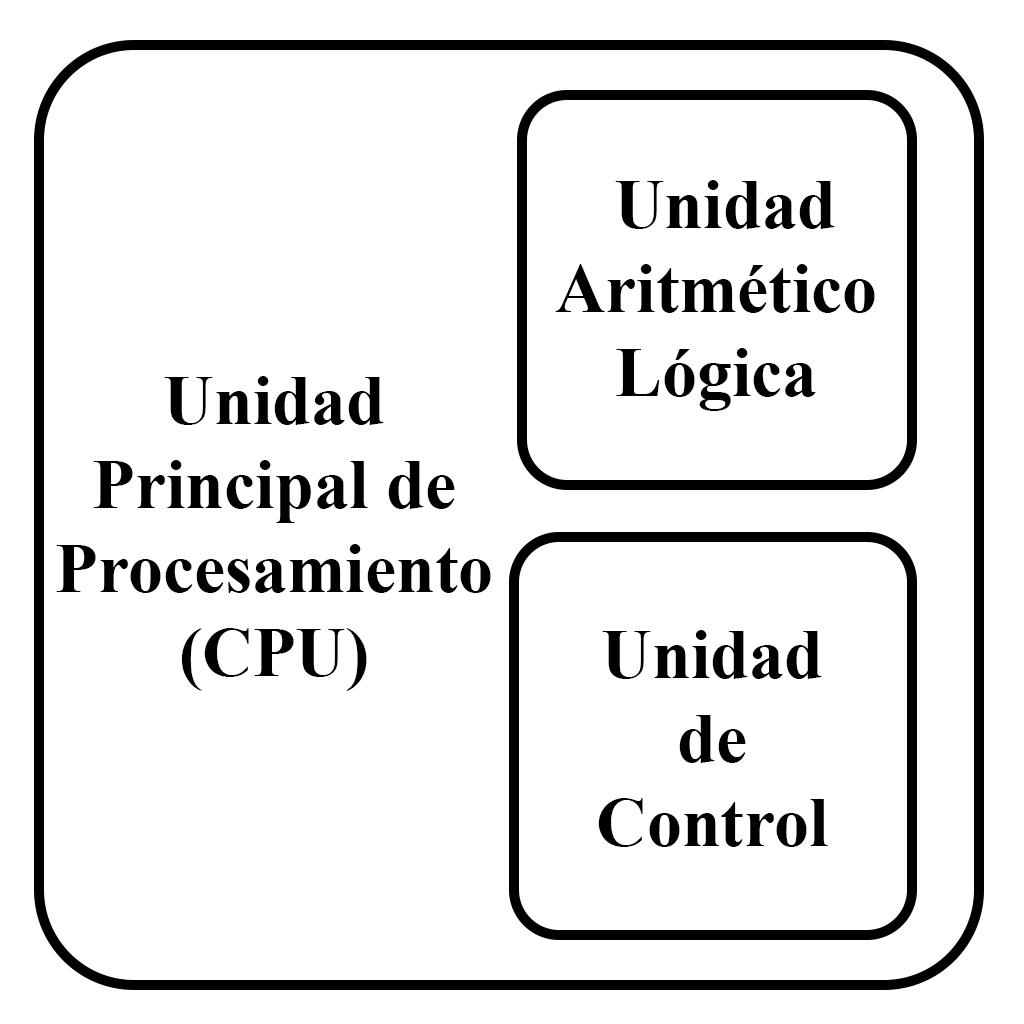
<style>
.page{position:relative;width:1024px;height:1024px;background:#ffffff}
.page>*{position:absolute;margin:0}
.t1{font:70px "TimesNewRomanPS-BoldMT";color:#000000}
</style>
<div class="page">
<p class="t1" style="left:555px;top:180px;width:320px;height:231px;text-align:center">Unidad <br>Aritmético<br>Lógica</p>
<p class="t1" style="left:56px;top:376px;width:435px;height:315px;text-align:center">Unidad<br>Principal de<br>Procesamiento<br>(CPU)</p>
<p class="t1" style="left:598px;top:630px;width:230px;height:217px;text-align:center">Unidad<br>de<br>Control</p>
</div>
